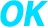
<style>
.page{position:relative;width:48px;height:28px;background:#ffffff}
.page>*{position:absolute;margin:0}
.t1{font:32px "RodinPro-EB";letter-spacing:-0.046em;color:#00dcfe;font-style:italic}
</style>
<div class="page">
<p class="t1" style="left:0px;top:0px;width:48px;height:27px">OK</p>
</div>
